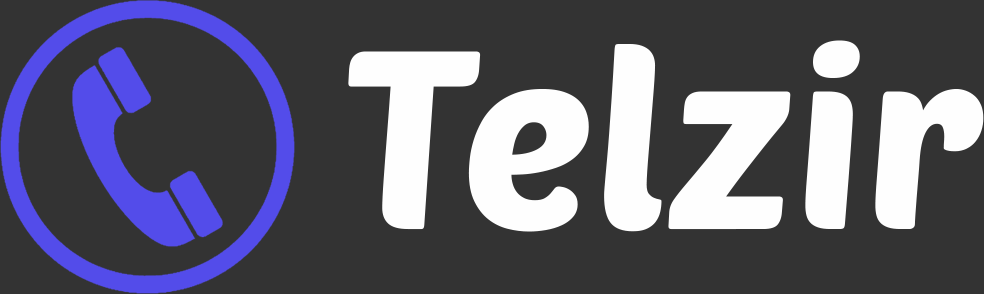
<style>
.page{position:relative;width:984px;height:294px;background:#333333}
.page>*{position:absolute;margin:0}
.t1{font:250px "PoetsenOne-Regular";color:#fefefe}
</style>
<div class="page">
<p class="t1" style="left:348px;top:40px;width:636px;height:192px">Telzir</p>
</div>
